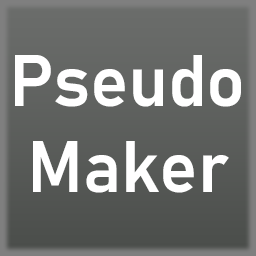
<style>
.page{position:relative;width:256px;height:256px}
.page>*{position:absolute;margin:0}
.t1{font:72px "Bahnschrift-SemiBold";color:#ffffff;font-style:italic}
</style>
<div class="page">
<p class="t1" style="left:15px;top:55px;width:226px;height:138px;text-align:center">Pseudo<br>Maker</p>
</div>
